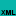
<style>
.page{position:relative;width:16px;height:16px;background:#07b5aa}
.page>*{position:absolute;margin:0}
.t1{font:7px "Arial-BoldMT";color:#000000}
</style>
<div class="page">
<p class="t1" style="left:1px;top:10px;width:15px;height:5px">XML</p>
</div>
